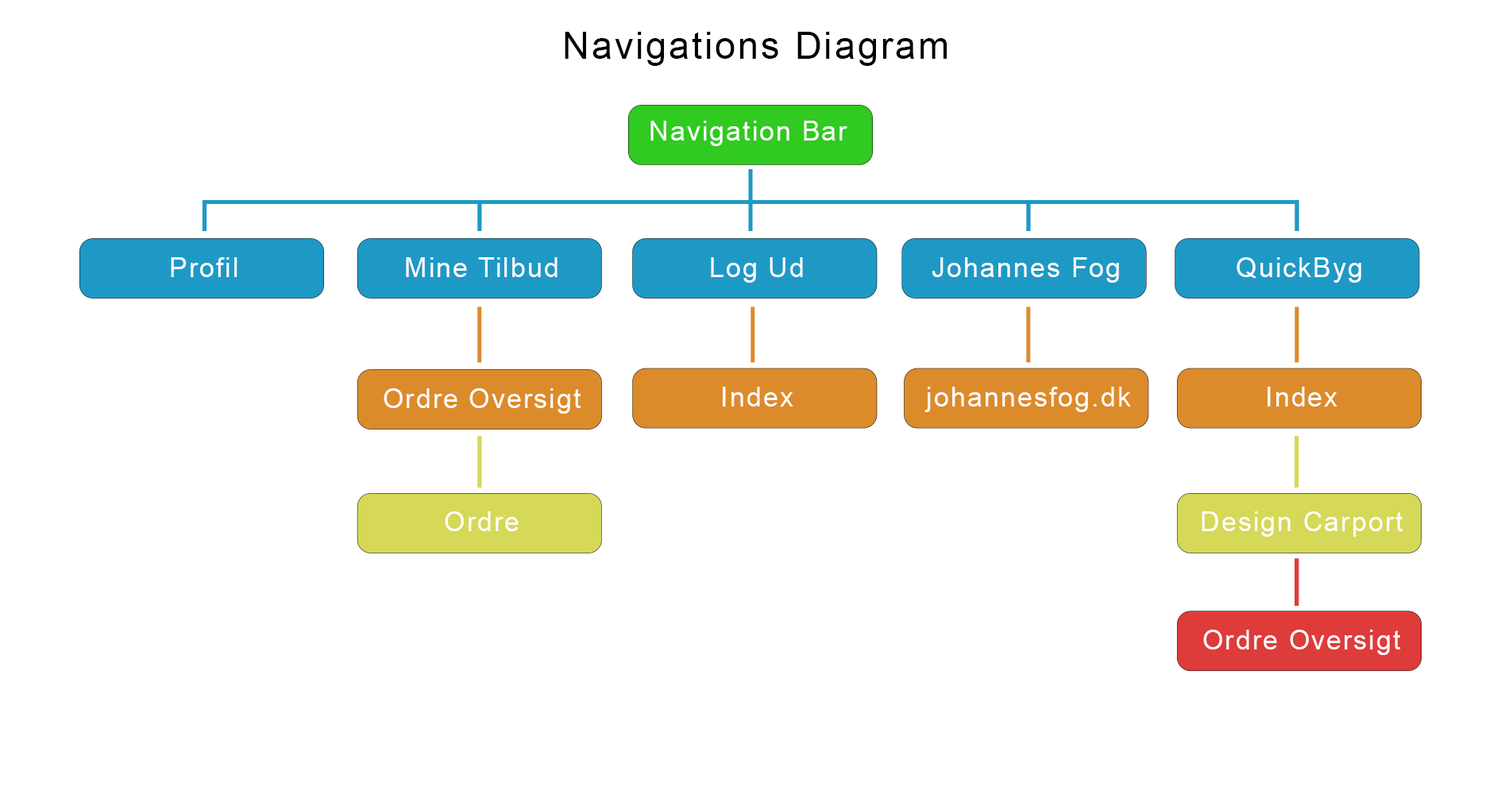
<style>
.page{position:relative;width:1501px;height:794px;background:#ffffff}
.page>*{position:absolute;margin:0}
.t1{font:37.3px "ArialMT";letter-spacing:0.06em;color:#000000}
.t2{font:27px "ArialMT";letter-spacing:0.06em;color:#ffffff}
</style>
<div class="page">
<p class="t1" style="left:565px;top:32px;width:383px;height:34px">Navigations Diagram</p>
<p class="t2" style="left:651px;top:121px;width:197px;height:25px">Navigation Bar</p>
<p class="t2" style="left:171px;top:257px;width:66px;height:20px">Profil</p>
<p class="t2" style="left:406px;top:257px;width:152px;height:20px">Mine Tilbud</p>
<p class="t2" style="left:711px;top:257px;width:92px;height:26px">Log Ud</p>
<p class="t2" style="left:932px;top:257px;width:187px;height:26px">Johannes Fog</p>
<p class="t2" style="left:1237px;top:257px;width:124px;height:26px">QuickByg</p>
<p class="t2" style="left:384px;top:388px;width:197px;height:26px">Ordre Oversigt</p>
<p class="t2" style="left:723px;top:387px;width:71px;height:20px">Index</p>
<p class="t2" style="left:925px;top:387px;width:206px;height:25px">johannesfog.dk</p>
<p class="t2" style="left:1268px;top:387px;width:70px;height:20px">Index</p>
<p class="t2" style="left:445px;top:512px;width:74px;height:19px">Ordre</p>
<p class="t2" style="left:1202px;top:512px;width:202px;height:25px">Design Carport</p>
<p class="t2" style="left:1203px;top:630px;width:198px;height:25px">Ordre Oversigt</p>
</div>
